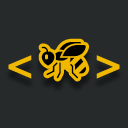
<style>
.page{position:relative;width:128px;height:128px;background:#262a2b}
.page>*{position:absolute;margin:0}
.t1{font:45px "YoxallBold";color:#f1b801}
.t2{font:45px "SegoeUIEmoji";color:#f1b801}
</style>
<div class="page">
<p class="t1" style="left:8px;top:38px;width:112px;height:44px">&lt;<span class="t2">🐝</span>&gt;</p>
</div>
